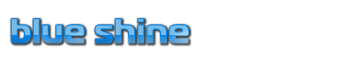
<style>
.page{position:relative;width:362px;height:61px;background:#ffffff}
.page>*{position:absolute;margin:0}
.t1{font:36px "MagistralBlackC"}
</style>
<div class="page">
<p class="t1" style="left:10px;top:18px;width:179px;height:26px">blue shine</p>
</div>
